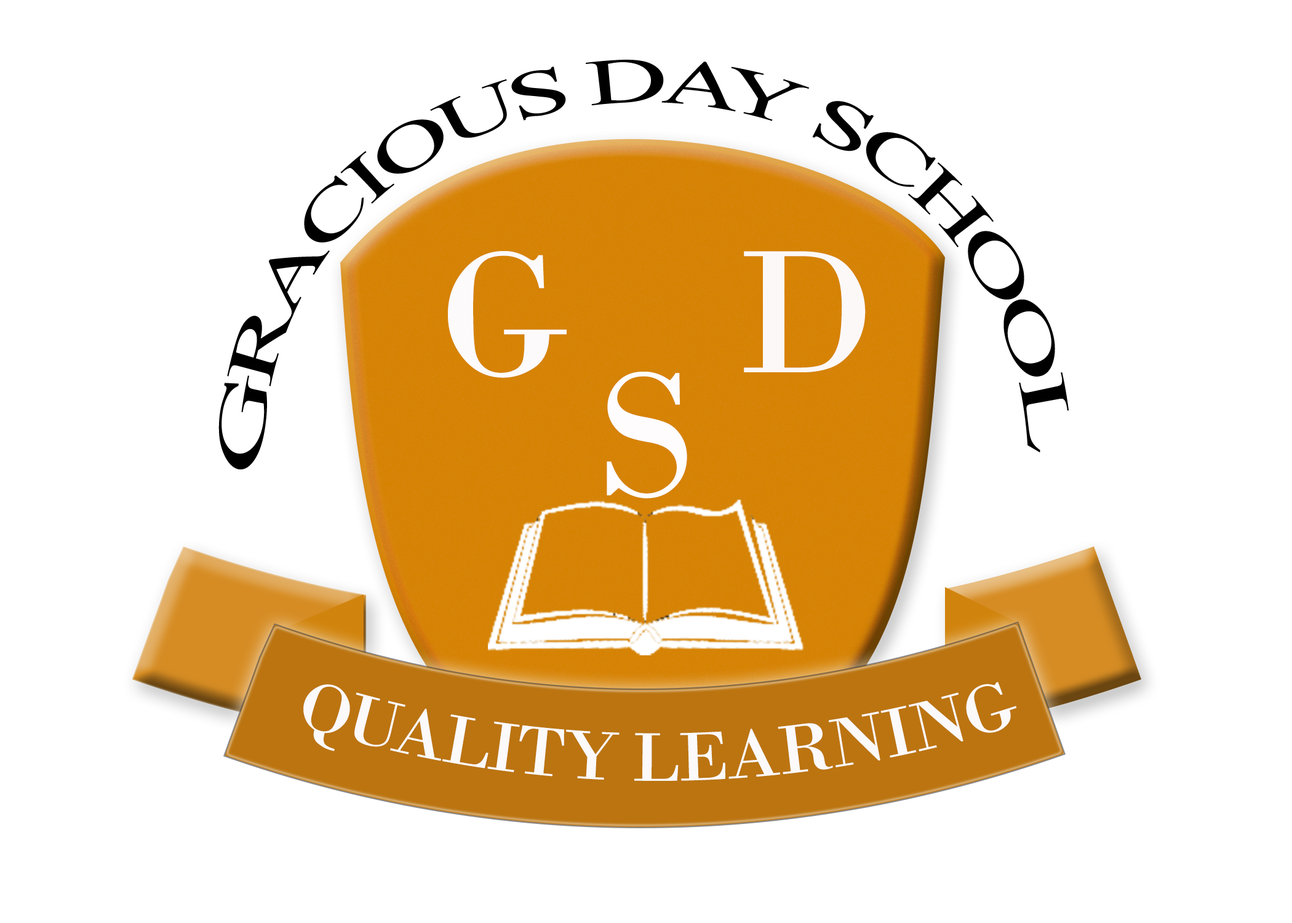
<style>
.page{position:relative;width:1292px;height:923px;background:#ffffff}
.page>*{position:absolute;margin:0}
.t1{font:64.7px/41.7px "MongolianBaiti";letter-spacing:-0.04em;color:#000000;scale:1.03 1}
.t2{font:184.6px "BodoniMT";letter-spacing:-0.04em;color:#fcfafa}
.t3{font:184.6px "BodoniMT";letter-spacing:-0.04em;color:#fcf8f8}
.t4{font:184.6px "BodoniMT";letter-spacing:-0.04em;color:#fefcfc}
.t5{font:71.7px "BodoniMT";letter-spacing:-0.04em;color:#fbf9f9}
</style>
<div class="page">
<p class="t1" style="left:218px;top:60px;width:851px;height:409px">GRACIOUS DAY SCHOOL</p>
<p class="t2" style="left:448px;top:251px;width:119px;height:127px">G</p>
<p class="t3" style="left:744px;top:251px;width:122px;height:121px">D</p>
<p class="t4" style="left:607px;top:372px;width:80px;height:126px">S</p>
<p class="t5" style="left:303px;top:682px;width:714px;height:99px">QUALITY LEARNING</p>
</div>
